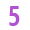
<style>
.page{position:relative;width:30px;height:30px;background:#ffffff}
.page>*{position:absolute;margin:0}
.t1{font:26.5px "MicrosoftYaHei-Bold";color:#b252d1;scale:0.79 1}
</style>
<div class="page">
<p class="t1" style="left:9px;top:6px;width:11px;height:20px">5</p>
</div>
